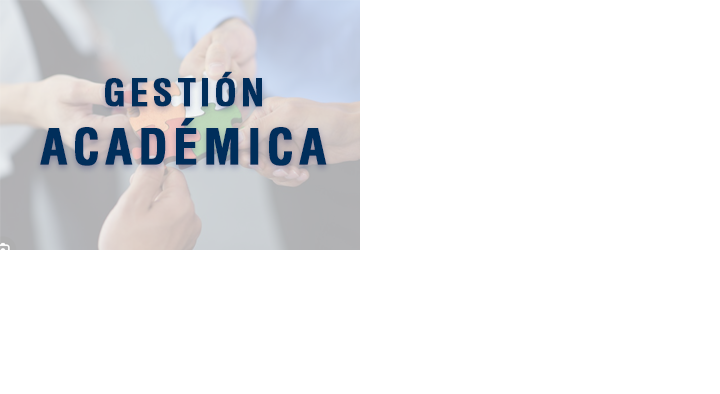
<style>
.page{position:relative;width:720px;height:394px;background:#ffffff}
.page>*{position:absolute;margin:0}
.t1{font:48px "Helvetica-Condensed-Bold";letter-spacing:0.1em;color:#002e5b;font-weight:bold}
.t2{font:36px "Helvetica-Condensed-Bold";letter-spacing:0.1em;color:#002e5b;font-weight:bold}
</style>
<div class="page">
<p class="t1" style="left:40px;top:71px;width:287px;height:95px;text-align:center"><span class="t2">GESTIÓN<br></span>ACADÉMICA</p>
</div>
